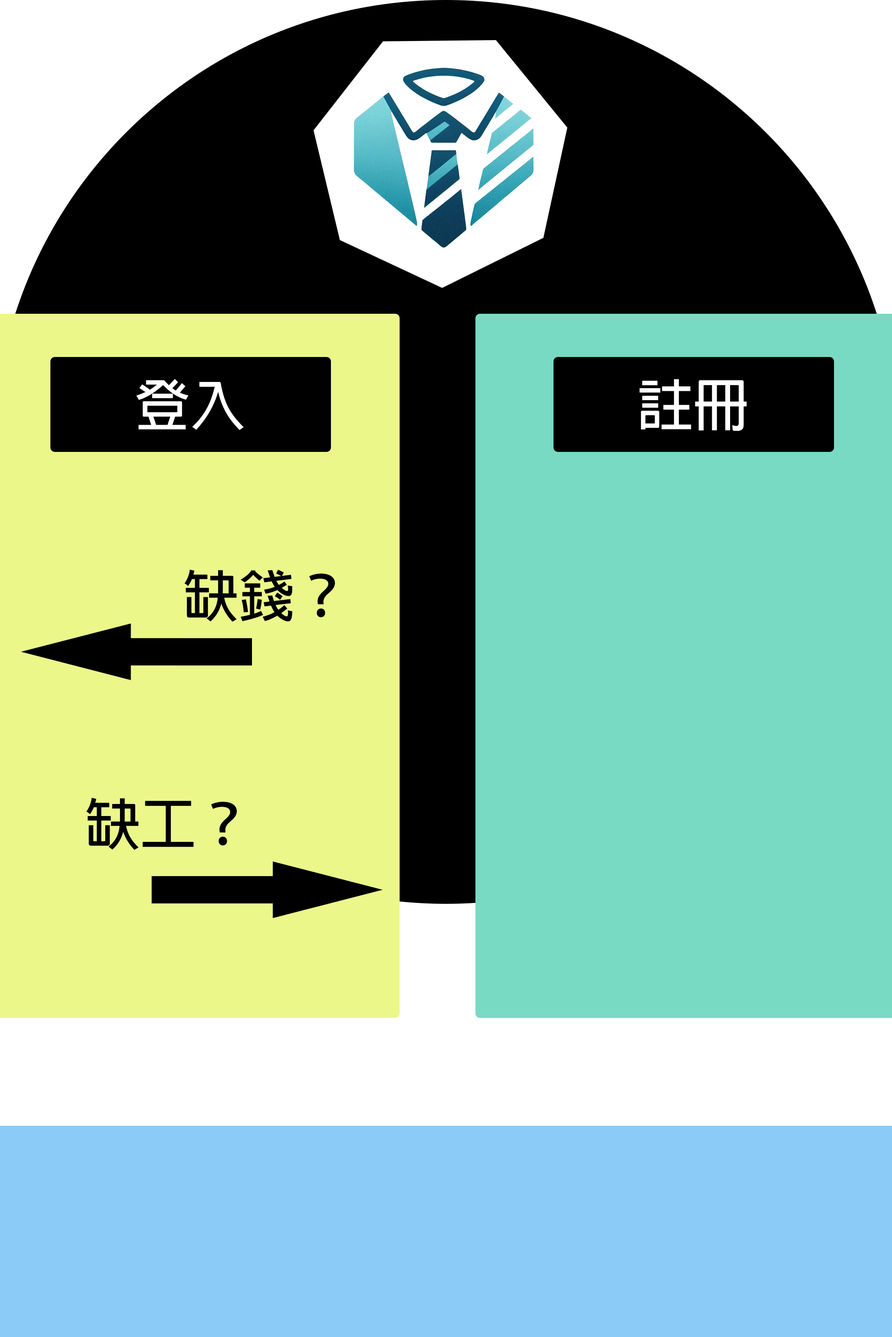
<style>
.page{position:relative;width:892px;height:1337px;background:#79dac3}
.page>*{position:absolute;margin:0}
.t1{font:55.7px "AdobeFanHeitiStd-Bold";color:#ffffff}
.t2{font:55.7px "AdobeFanHeitiStd-Bold";color:#000000}
</style>
<div class="page">
<p class="t1" style="left:136px;top:379px;width:107px;height:51px">登入</p>
<p class="t1" style="left:639px;top:379px;width:107px;height:52px">註冊</p>
<p class="t2" style="left:184px;top:570px;width:151px;height:52px">缺錢？</p>
<p class="t2" style="left:86px;top:798px;width:151px;height:52px">缺工？</p>
</div>
